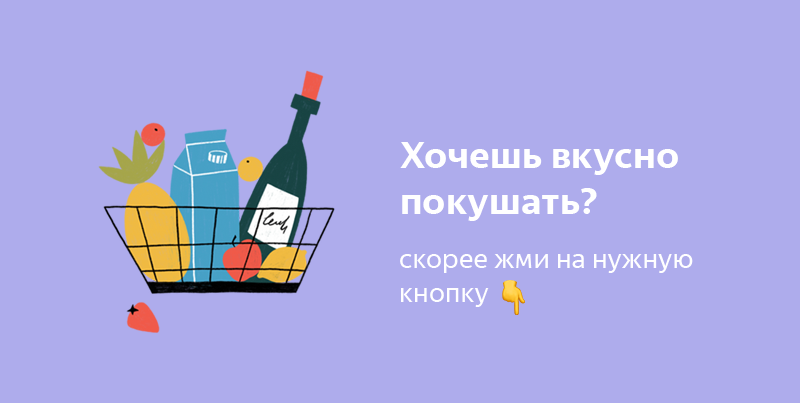
<style>
.page{position:relative;width:800px;height:403px;background:#aeacec}
.page>*{position:absolute;margin:0}
.t1{font:38.2px "YandexSansDisplay-Bold";color:#ffffff}
.t2{font:28.2px "YandexSansDisplay-Regular";color:#ffffff}
</style>
<div class="page">
<p class="t1" style="left:400px;top:142px;width:278px;height:79px">Хочешь вкусно <br>покушать?</p>
<p class="t2" style="left:400px;top:254px;width:293px;height:53px">скорее жми на нужную<br>кнопку</p>
</div>
